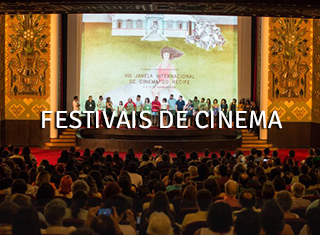
<style>
.page{position:relative;width:320px;height:235px}
.page>*{position:absolute;margin:0}
.t1{font:25px "Signika-Regular";letter-spacing:-0.01em;color:#ffffff}
</style>
<div class="page">
<p class="t1" style="left:42px;top:110px;width:241px;height:19px">FESTIVAIS DE CINEMA</p>
</div>
